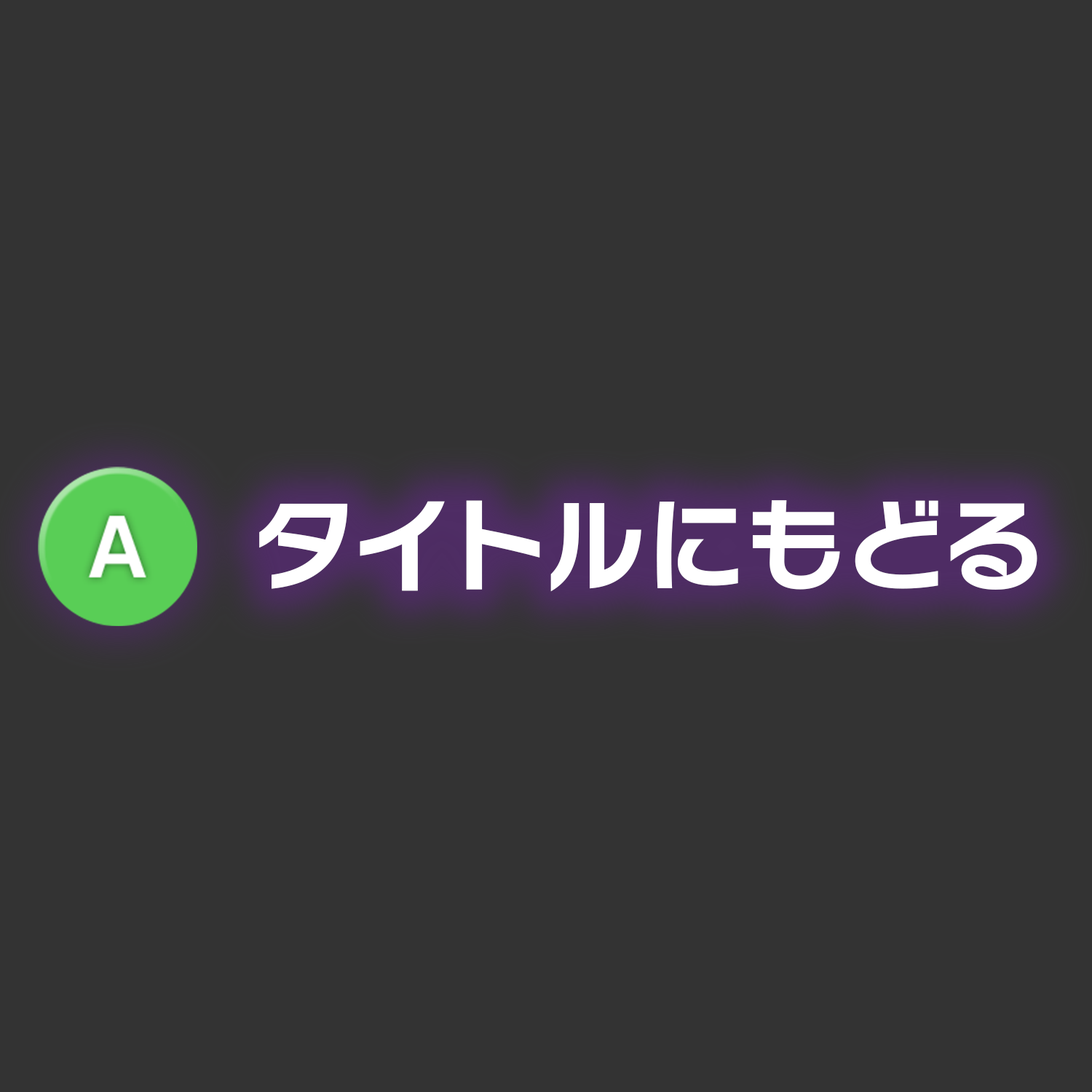
<style>
.page{position:relative;width:1092px;height:1092px;background:#333333}
.page>*{position:absolute;margin:0}
.t1{font:104.7px "NitalagoRuika-06";color:#ffffff}
</style>
<div class="page">
<p class="t1" style="left:259px;top:500px;width:778px;height:92px">タイトルにもどる</p>
</div>
